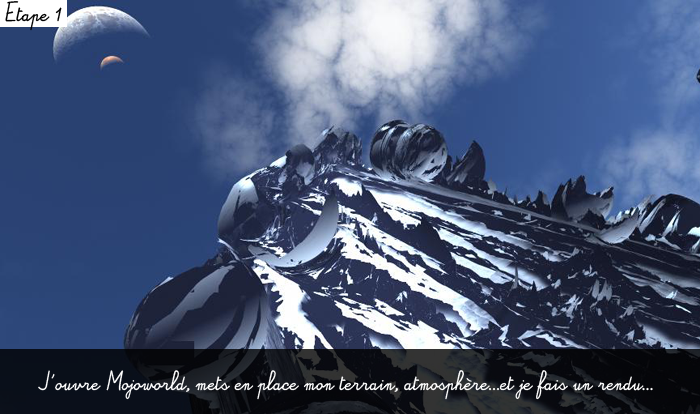
<style>
.page{position:relative;width:700px;height:414px}
.page>*{position:absolute;margin:0}
.t1{font:13.3px/27.3px "Alamain";color:#000000}
.t2{font:13.3px/27.3px "Alamain";color:#ffffff}
</style>
<div class="page">
<p class="t1" style="left:5px;top:1px;width:57px;height:30px">Etape 1</p>
<p class="t2" style="left:38px;top:370px;width:615px;height:30px">J'ouvre Mojoworld, mets en place mon terrain, atmosphère...et je fais un rendu...</p>
</div>
